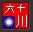
<style>
.page{position:relative;width:33px;height:32px;background:#f20000}
.page>*{position:absolute;margin:0}
.t1{font:10.4px "SimSun";color:#ffffff}
.t2{font:11.7px "SimSun";color:#ffffff}
</style>
<div class="page">
<p class="t1" style="left:5px;top:4px;width:20px;height:9px">六十</p>
<p class="t2" style="left:16px;top:15px;width:11px;height:12px">川</p>
</div>
